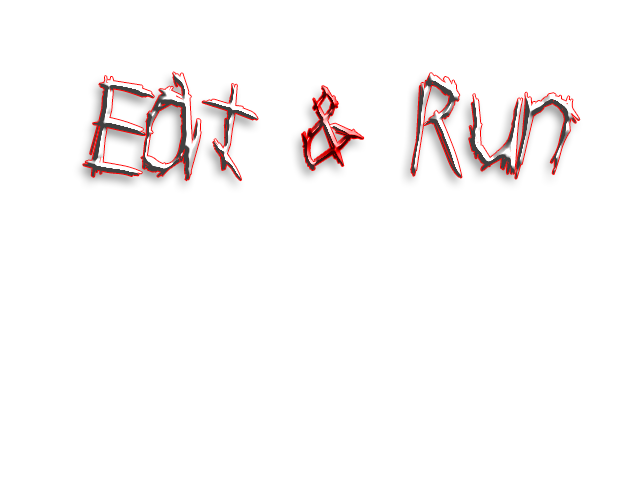
<style>
.page{position:relative;width:640px;height:480px;background:#ffffff}
.page>*{position:absolute;margin:0}
.t1{font:125px "onryou";letter-spacing:-0.1em;font-weight:bold;font-style:italic}
</style>
<div class="page">
<p class="t1" style="left:83px;top:72px;width:497px;height:109px">Eat &amp; Run</p>
</div>
